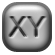
<style>
.page{position:relative;width:55px;height:55px;background:#ffffff}
.page>*{position:absolute;margin:0}
.t1{font:28px "ArialMT"}
</style>
<div class="page">
<p class="t1" style="left:9px;top:17px;width:37px;height:20px">XY</p>
</div>
